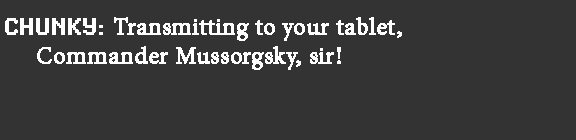
<style>
.page{position:relative;width:576px;height:140px;background:#333333}
.page>*{position:absolute;margin:0}
.t1{font:24px "MinionPro-Regular";color:#ffffff;font-weight:bold}
.t2{font:24px "SynchroLET";color:#ffffff;font-weight:bold}
</style>
<div class="page">
<p class="t1" style="left:5px;top:17px;width:397px;height:53px"><span class="t2">CHUNKY: </span>Transmitting to your tablet, <br>     Commander Mussorgsky, sir!</p>
</div>
